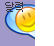
<style>
.page{position:relative;width:54px;height:46px;background:#ffffff}
.page>*{position:absolute;margin:0}
.t1{font:10.7px "Gulim";color:#38363f}
</style>
<div class="page">
<p class="t1" style="left:5px;top:2px;width:18px;height:10px">달력</p>
</div>
